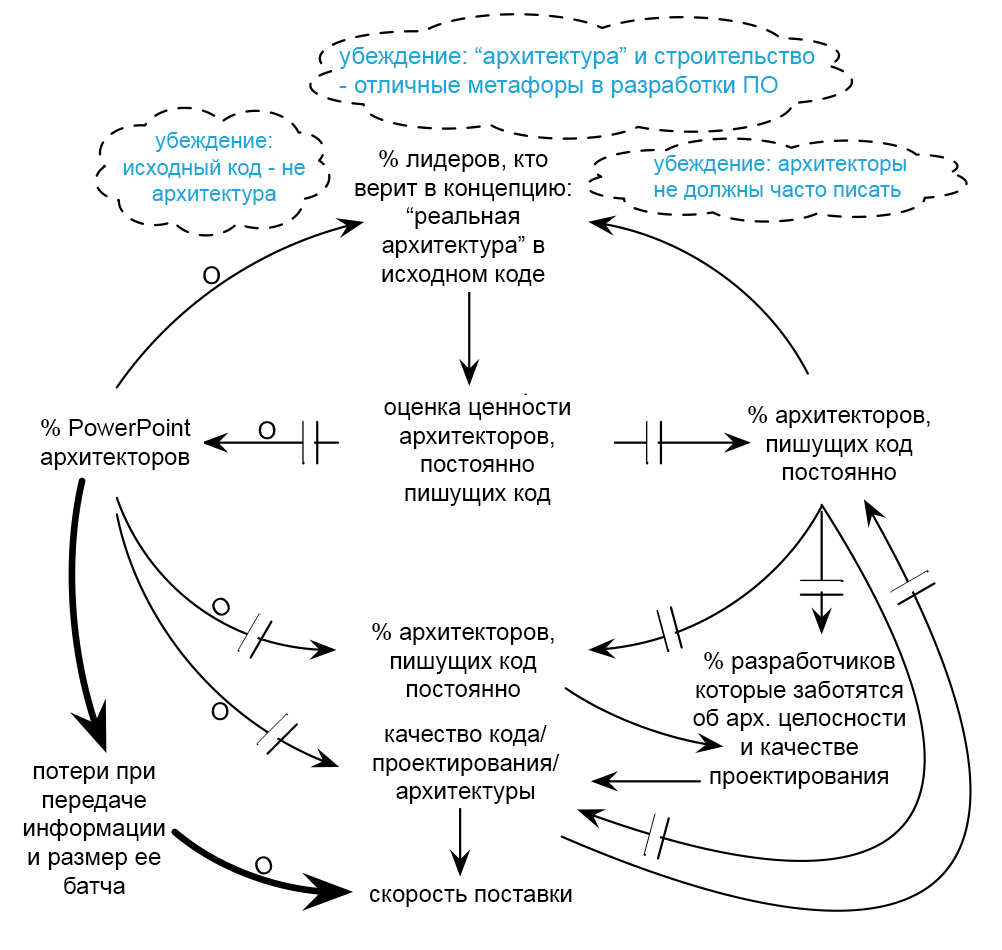
<style>
.page{position:relative;width:1002px;height:950px;background:#ffffff}
.page>*{position:absolute;margin:0}
.t1{font:24px "ArialMT";color:#1ba5d9}
.t2{font:22px "ArialMT";color:#1ba5d9}
.t3{font:24px "ArialMT";color:#000000}
</style>
<div class="page">
<p class="t1" style="left:339px;top:47px;width:476px;height:51px">убеждение: “архитектура” и строительство - отличные метафоры в разработки ПО</p>
<p class="t2" style="left:123px;top:132px;width:182px;height:73px;text-align:center">убеждение: исходный код - не архитектура</p>
<p class="t3" style="left:355px;top:150px;width:216px;height:136px;text-align:center">% лидеров, кто верит в концепцию: “реальная архитектура” в исходном коде</p>
<p class="t2" style="left:653px;top:155px;width:253px;height:45px">убеждение: архитекторы не должны часто писать код</p>
<p class="t3" style="left:384px;top:402px;width:186px;height:104px;text-align:center">оценка ценности архитекторов,<br>постоянно пишущих код</p>
<p class="t3" style="left:748px;top:406px;width:182px;height:74px;text-align:center">% архитекторов, пишущих код постоянно</p>
<p class="t3" style="left:40px;top:418px;width:151px;height:52px;text-align:center">% PowerPoint архитекторов</p>
<p class="t3" style="left:372px;top:623px;width:182px;height:74px;text-align:center">% архитекторов, пишущих код постоянно</p>
<p class="t3" style="left:693px;top:652px;width:212px;height:137px;text-align:center">% разработчиков<br>которые заботятся <br>об арх. целосности и качестве проектирования</p>
<p class="t3" style="left:373px;top:725px;width:187px;height:79px;text-align:center">качество кода/ проектирования/ архитектуры</p>
<p class="t3" style="left:23px;top:766px;width:142px;height:128px;text-align:center">потери при передаче информации и размер ее батча</p>
<p class="t3" style="left:369px;top:889px;width:203px;height:18px">скорость поставки</p>
</div>
